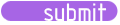
<style>
.page{position:relative;width:120px;height:25px;background:#a765e5}
.page>*{position:absolute;margin:0}
.t1{font:20px "TechnicznaPomoc";color:#fefefe}
</style>
<div class="page">
<p class="t1" style="left:44px;top:3px;width:63px;height:19px">submit</p>
</div>
